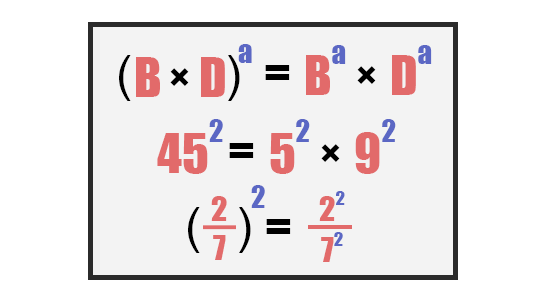
<style>
.page{position:relative;width:548px;height:300px;background:#f3f3f3}
.page>*{position:absolute;margin:0}
.t1{font:50px "Impact";color:#5b67c4}
.t2{font:50px "Impact";color:#e26a6a}
.t3{font:49.7px "ArialMT";color:#000000}
.t4{font:50px "Impact";color:#000000}
.t5{font:42.9px "Impact";color:#000000}
.t6{font:31.2px "Impact";color:#e26a6a;scale:1.05 1}
.t7{font:31.2px "Impact";color:#5b67c4;scale:1.05 1}
</style>
<div class="page">
<p class="t1" style="left:238px;top:44px;width:14px;height:19px">a</p>
<p class="t2" style="left:306px;top:45px;width:40px;height:50px">B<span class="t1">a</span></p>
<p class="t2" style="left:392px;top:45px;width:40px;height:50px">D<span class="t1">a</span></p>
<p class="t3" style="left:119px;top:55px;width:12px;height:46px">(</p>
<p class="t2" style="left:136px;top:57px;width:24px;height:40px">B</p>
<p class="t2" style="left:201px;top:57px;width:24px;height:40px">D</p>
<p class="t3" style="left:228px;top:55px;width:12px;height:46px">)</p>
<p class="t4" style="left:265px;top:65px;width:25px;height:15px">=</p>
<p class="t5" style="left:170px;top:68px;width:19px;height:18px;rotate:45deg">+</p>
<p class="t5" style="left:357px;top:66px;width:19px;height:18px;rotate:45deg">+</p>
<p class="t2" style="left:157px;top:119px;width:66px;height:55px">45<span class="t1">2</span></p>
<p class="t2" style="left:270px;top:119px;width:40px;height:55px">5<span class="t1">2</span></p>
<p class="t2" style="left:355px;top:119px;width:41px;height:55px">9<span class="t1">2</span></p>
<p class="t4" style="left:229px;top:143px;width:25px;height:15px">=</p>
<p class="t5" style="left:321px;top:144px;width:19px;height:18px;rotate:45deg">+</p>
<p class="t1" style="left:251px;top:185px;width:14px;height:23px">2</p>
<p class="t6" style="left:211px;top:196px;width:16px;height:25px">2</p>
<p class="t6" style="left:319px;top:191px;width:26px;height:30px">2<span class="t7">2</span></p>
<p class="t3" style="left:188px;top:207px;width:12px;height:46px">(</p>
<p class="t3" style="left:239px;top:207px;width:12px;height:46px">)</p>
<p class="t4" style="left:266px;top:219px;width:25px;height:15px">=</p>
<p class="t6" style="left:321px;top:232px;width:22px;height:30px">7<span class="t7">2</span></p>
<p class="t6" style="left:213px;top:235px;width:13px;height:25px">7</p>
</div>
